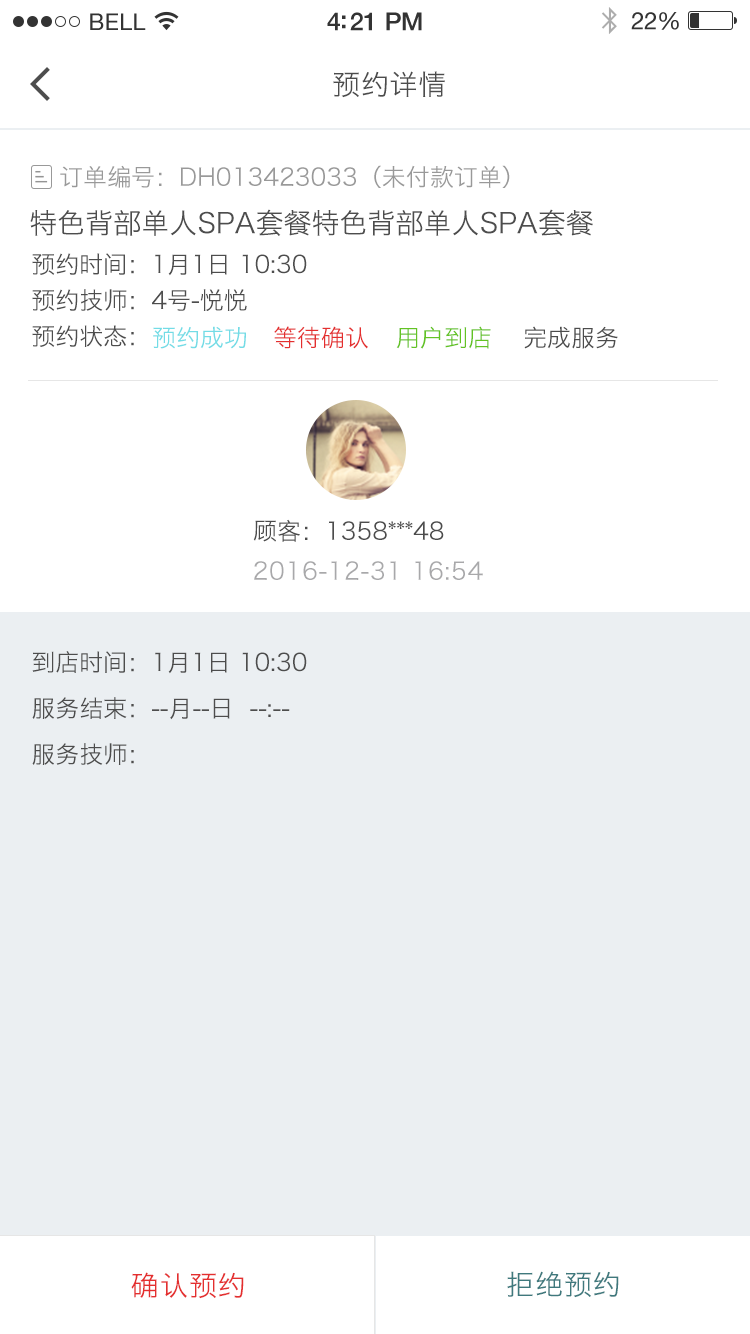
<style>
.page{position:relative;width:750px;height:1334px;background:#ffffff}
.page>*{position:absolute;margin:0}
.t1{font:28px "HiraginoSansGB-W3";letter-spacing:0.03em;color:#4c4c4c}
.t2{font:24px "HiraginoSansGB-W3";color:#999999}
.t3{font:28px "HiraginoSansGB-W3";color:#4d4d4d}
.t4{font:24px/36px "HiraginoSansGB-W3";color:#4c4c4c}
.t5{font:28px/34px "HiraginoSansGB-W3";color:#4d4d4d}
.t6{font:24px "HiraginoSansGB-W3";color:#73dce6}
.t7{font:24px "HiraginoSansGB-W3";color:#e42f2f}
.t8{font:24px "HiraginoSansGB-W3";color:#63c323}
.t9{font:24px "HiraginoSansGB-W3";color:#4c4c4c}
.t10{font:24px "HiraginoSansGB-W3";letter-spacing:0.03em;color:#a8a8aa}
.t11{font:24px/46px "HiraginoSansGB-W3";color:#4c4c4c}
.t12{font:28px "HiraginoSansGB-W3";letter-spacing:0.03em;color:#e42f2f}
.t13{font:28px "HiraginoSansGB-W3";letter-spacing:0.03em;color:#3f797d}
</style>
<div class="page">
<p class="t1" style="left:333px;top:71px;width:112px;height:27px">预约详情</p>
<p class="t2" style="left:60px;top:165px;width:450px;height:23px">订单编号：DH013423033（未付款订单）</p>
<p class="t3" style="left:30px;top:209px;width:563px;height:27px">特色背部单人SPA套餐特色背部单人SPA套餐</p>
<p class="t4" style="left:32px;top:253px;width:275px;height:94px"><span class="t5"><br></span>预约时间：1月1日 10:30<br>预约技师：4号-悦悦<br>预约状态：</p>
<p class="t6" style="left:153px;top:326px;width:93px;height:23px">预约成功</p>
<p class="t7" style="left:274px;top:326px;width:94px;height:23px">等待确认</p>
<p class="t8" style="left:396px;top:326px;width:95px;height:23px">用户到店</p>
<p class="t9" style="left:524px;top:326px;width:94px;height:23px">完成服务</p>
<p class="t9" style="left:253px;top:519px;width:191px;height:23px">顾客：1358***48</p>
<p class="t10" style="left:254px;top:561px;width:229px;height:19px">2016-12-31 16:54</p>
<p class="t11" style="left:32px;top:651px;width:275px;height:114px"><span class="t5"><br></span>到店时间：1月1日 10:30<br>服务结束：--月--日  --:--<br>服务技师：</p>
<p class="t12" style="left:131px;top:1272px;width:113px;height:27px">确认预约</p>
<p class="t13" style="left:507px;top:1271px;width:112px;height:27px">拒绝预约</p>
</div>
